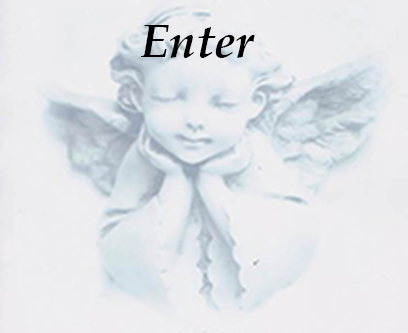
<style>
.page{position:relative;width:408px;height:333px}
.page>*{position:absolute;margin:0}
.t1{font:47.2px "BookAntiqua-BoldItalic";color:#000000}
</style>
<div class="page">
<p class="t1" style="left:140px;top:25px;width:115px;height:33px">Enter</p>
</div>
